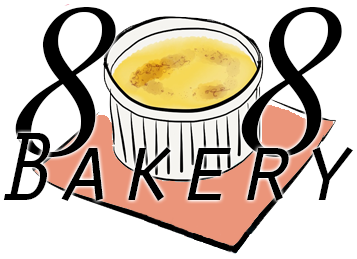
<style>
.page{position:relative;width:357px;height:259px;background:#ffffff}
.page>*{position:absolute;margin:0}
.t1{font:150px "MarkerFelt-Thin";color:#000000}
.t2{font:233.3px "Garamond-Italic";color:#000000}
.t3{font:100px "OratorStd-Slanted";color:#000000}
</style>
<div class="page">
<p class="t1" style="left:15px;top:7px;width:327px;height:150px;text-align:center"><span class="t2">8  8<br></span>backery<br>B</p>
<p class="t3" style="left:3px;top:133px;width:350px;height:68px">Bakery</p>
</div>
